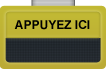
<style>
.page{position:relative;width:106px;height:69px}
.page>*{position:absolute;margin:0}
.t1{font:12px "Arial-BoldMT";color:#000000}
</style>
<div class="page">
<p class="t1" style="left:14px;top:20px;width:76px;height:10px">APPUYEZ ICI</p>
</div>
